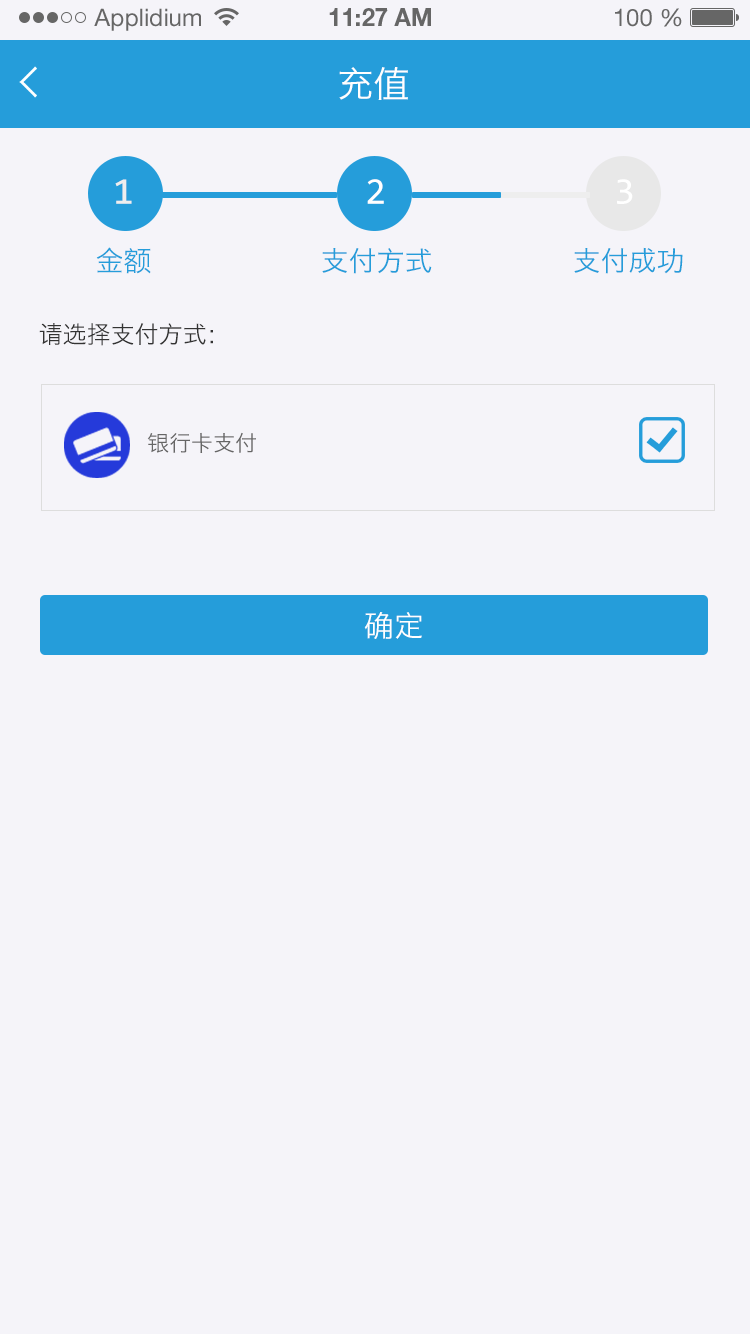
<style>
.page{position:relative;width:750px;height:1334px;background:#f5f4f9}
.page>*{position:absolute;margin:0}
.t1{font:24px "HelveticaNeueLTStd-Roman";color:#666666}
.t2{font:24px "HelveticaNeueLTStd-Bd";color:#666666}
.t3{font:36px "HiraginoSansGB-W3";color:#ffffff;text-transform:uppercase}
.t4{font:38px "Consolas";color:#eeeeee;text-transform:uppercase}
.t5{font:38px "Consolas";color:#ffffff;text-transform:uppercase}
.t6{font:28px "HiraginoSansGB-W3";color:#259dda;text-transform:uppercase}
.t7{font:24px "HiraginoSansGB-W3";color:#333333;text-transform:uppercase}
.t8{font:22px "HiraginoSansGB-W3";color:#666666;text-transform:uppercase}
.t9{font:30px "HiraginoSansGB-W3";color:#ffffff;text-transform:uppercase}
</style>
<div class="page">
<p class="t1" style="left:94px;top:8px;width:107px;height:23px">Applidium</p>
<p class="t2" style="left:329px;top:8px;width:102px;height:18px">11:27 AM</p>
<p class="t1" style="left:615px;top:8px;width:67px;height:19px">100 %</p>
<p class="t3" style="left:339px;top:67px;width:69px;height:33px">充值</p>
<p class="t4" style="left:115px;top:179px;width:17px;height:25px">1</p>
<p class="t5" style="left:367px;top:179px;width:17px;height:25px">2</p>
<p class="t5" style="left:617px;top:179px;width:16px;height:25px">3</p>
<p class="t6" style="left:96px;top:247px;width:55px;height:27px">金额</p>
<p class="t6" style="left:322px;top:248px;width:110px;height:26px">支付方式</p>
<p class="t6" style="left:574px;top:247px;width:109px;height:27px">支付成功</p>
<p class="t7" style="left:39px;top:323px;width:174px;height:23px">请选择支付方式：</p>
<p class="t8" style="left:147px;top:432px;width:109px;height:21px">银行卡支付</p>
<p class="t9" style="left:364px;top:612px;width:58px;height:27px">确定</p>
</div>
